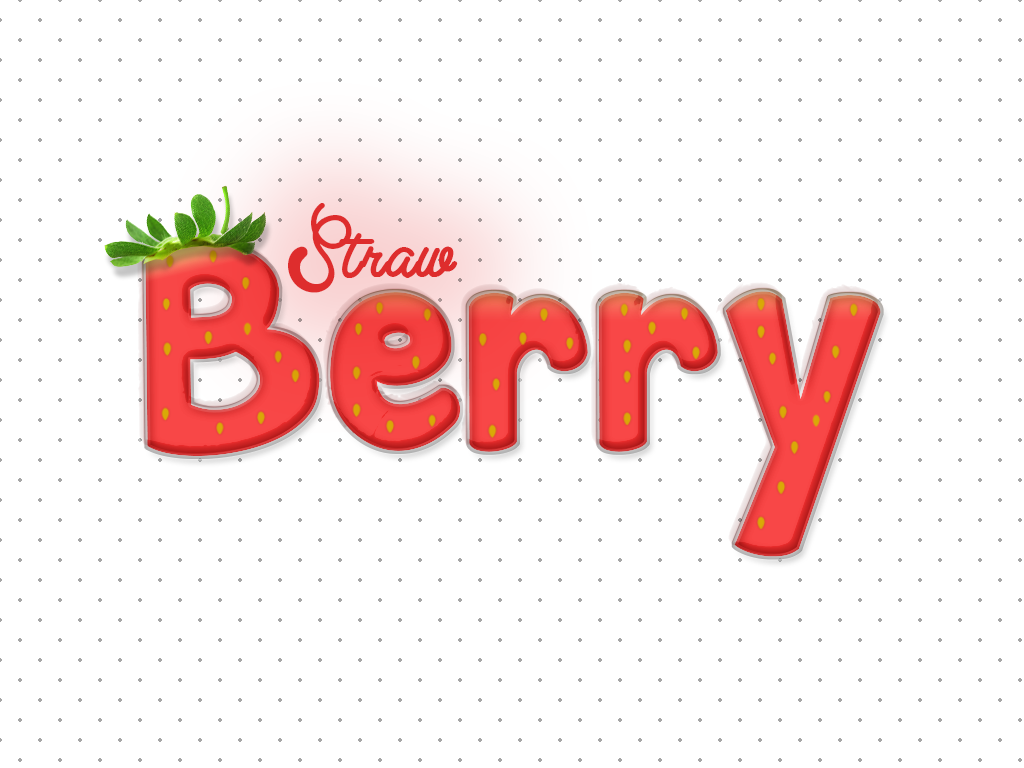
<style>
.page{position:relative;width:1024px;height:768px;background:#ffffff}
.page>*{position:absolute;margin:0}
.t1{font:89px "ClearLine-PERSONALUSEONLY";letter-spacing:0.02em;color:#de2d2d}
.t2{font:263.2px "JandaManateeSolidCyrillic";letter-spacing:0.02em;color:#f12f2f}
</style>
<div class="page">
<p class="t1" style="left:288px;top:203px;width:170px;height:90px">Straw</p>
<p class="t2" style="left:143px;top:240px;width:736px;height:315px">Berry</p>
<p class="t2" style="left:145px;top:242px;width:736px;height:315px">Berry</p>
</div>
